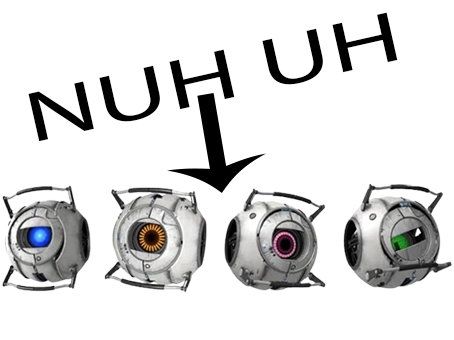
<style>
.page{position:relative;width:454px;height:340px;background:#ffffff}
.page>*{position:absolute;margin:0}
.t1{font:71.9px "MyriadPro-Regular";color:#000000;scale:1.54 1}
</style>
<div class="page">
<p class="t1" style="left:28px;top:12px;width:370px;height:130px;rotate:-13deg">NUH UH</p>
</div>
